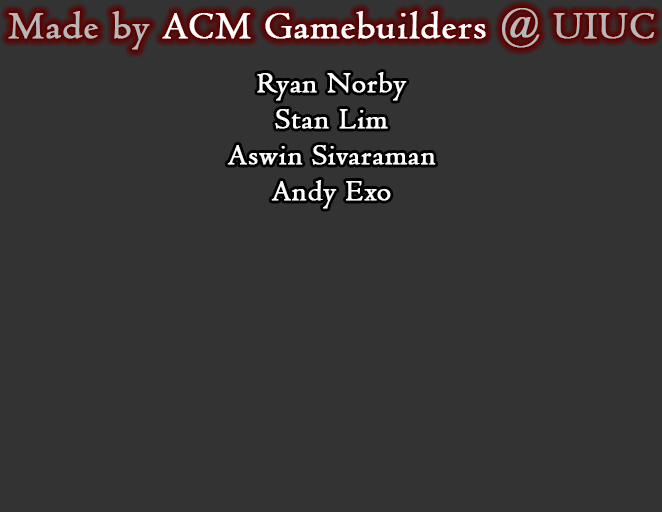
<style>
.page{position:relative;width:662px;height:512px;background:#333333}
.page>*{position:absolute;margin:0}
.t1{font:40px "Centaur";letter-spacing:0.025em;color:#ffffff;font-weight:bold}
.t2{font:40px "Centaur";letter-spacing:0.025em;color:#b8b8b8;font-weight:bold}
.t3{font:30px "Centaur";letter-spacing:0.025em;color:#ffffff;font-weight:bold}
</style>
<div class="page">
<p class="t1" style="left:8px;top:8px;width:646px;height:42px"><span class="t2">Made by</span> ACM Gamebuilders <span class="t2">@ UIUC</span></p>
<p class="t3" style="left:227px;top:72px;width:209px;height:137px;text-align:center">Ryan Norby<br>Stan Lim<br>Aswin Sivaraman<br>Andy Exo</p>
</div>
